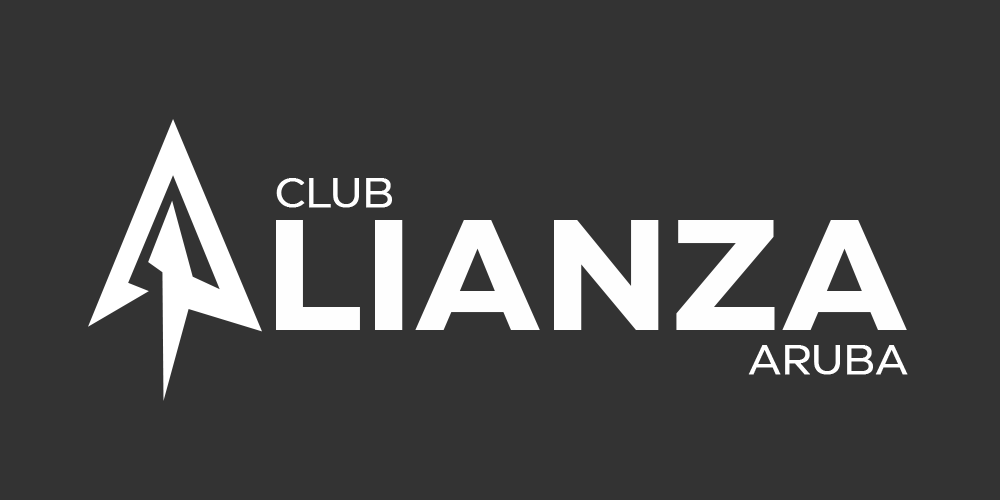
<style>
.page{position:relative;width:1000px;height:500px;background:#333333}
.page>*{position:absolute;margin:0}
.t1{font:41.7px "Eastman-Regular";color:#ffffff;font-weight:bold}
.t2{font:158.3px "Eastman-Bold";color:#fefefe}
</style>
<div class="page">
<p class="t1" style="left:276px;top:178px;width:116px;height:30px">CLUB</p>
<p class="t2" style="left:276px;top:220px;width:631px;height:110px">LIANZA</p>
<p class="t1" style="left:748px;top:345px;width:160px;height:30px">ARUBA</p>
</div>
